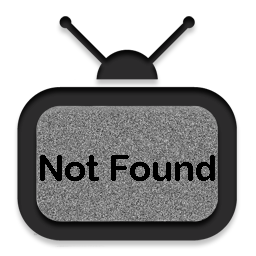
<style>
.page{position:relative;width:256px;height:256px;background:#ffffff}
.page>*{position:absolute;margin:0}
.t1{font:36px "ArialRoundedMTBold";color:#000000}
</style>
<div class="page">
<p class="t1" style="left:40px;top:155px;width:175px;height:26px">Not Found</p>
</div>
